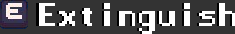
<style>
.page{position:relative;width:235px;height:34px;background:#333333}
.page>*{position:absolute;margin:0}
.t1{font:30px "ManaspaceReg";color:#ffffff}
</style>
<div class="page">
<p class="t1" style="left:39px;top:3px;width:196px;height:31px">Extinguish</p>
</div>
